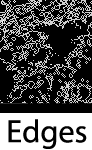
<style>
.page{position:relative;width:92px;height:150px;background:#000000}
.page>*{position:absolute;margin:0}
.t1{font:32.3px "MyriadPro-Regular";color:#000000}
</style>
<div class="page">
<p class="t1" style="left:8px;top:119px;width:79px;height:30px">Edges</p>
</div>
